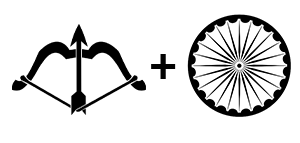
<style>
.page{position:relative;width:300px;height:143px;background:#ffffff}
.page>*{position:absolute;margin:0}
.t1{font:60px "Candara-Bold";color:#030303}
</style>
<div class="page">
<p class="t1" style="left:151px;top:54px;width:25px;height:25px">+</p>
</div>
